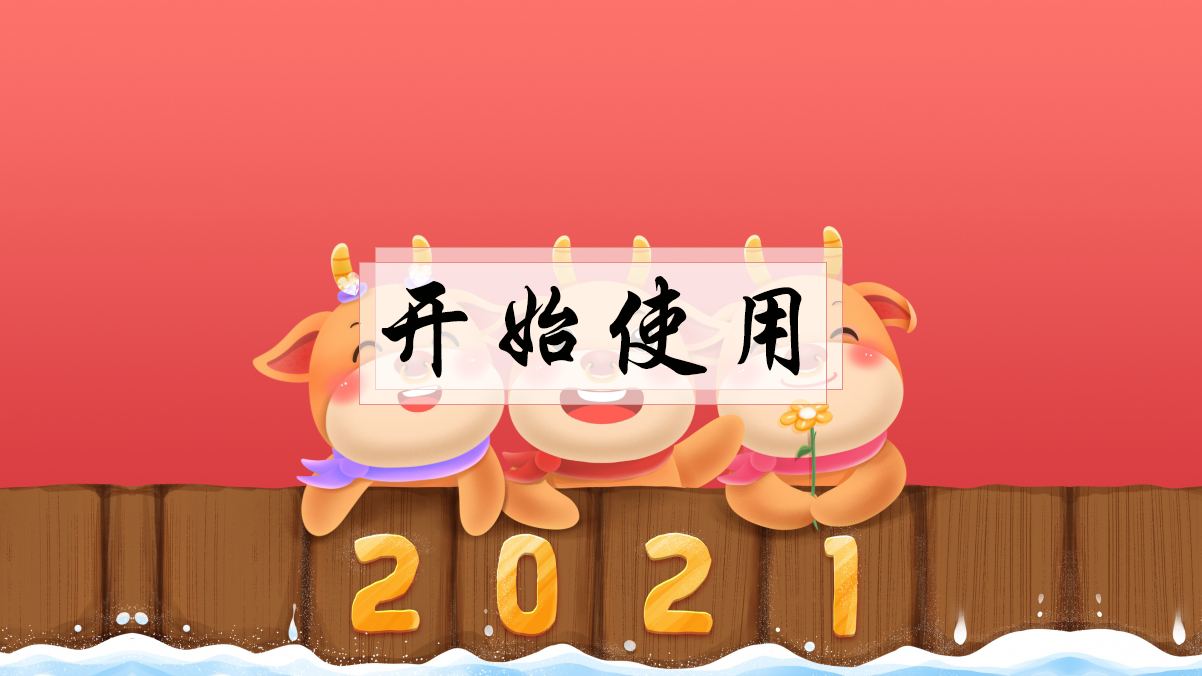
<style>
.page{position:relative;width:1202px;height:676px}
.page>*{position:absolute;margin:0}
.t1{font:109.9px "FZXKJW--GB1-0";letter-spacing:0.05em;color:#010100}
</style>
<div class="page">
<p class="t1" style="left:381px;top:276px;width:421px;height:102px">开始使用</p>
</div>
